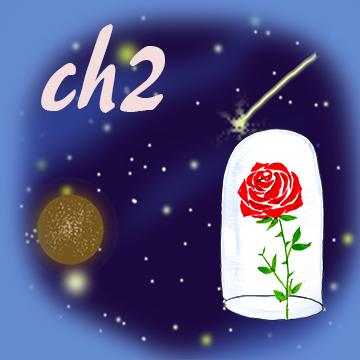
<style>
.page{position:relative;width:360px;height:360px}
.page>*{position:absolute;margin:0}
.t1{font:124.7px "ARBERKLEY";color:#f3dddd;scale:0.8 1}
</style>
<div class="page">
<p class="t1" style="left:41px;top:24px;width:124px;height:89px">ch2</p>
</div>
